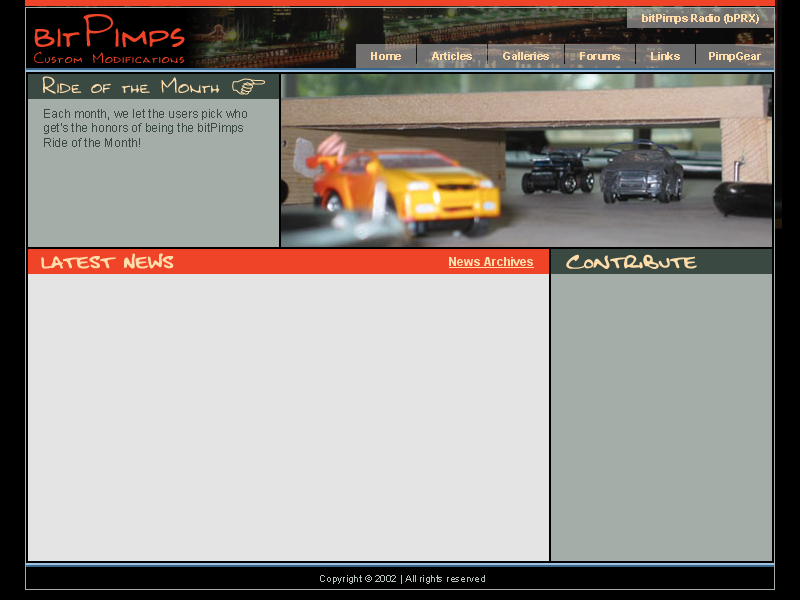
<style>
.page{position:relative;width:800px;height:600px;background:#e4e4e4}
.page>*{position:absolute;margin:0}
.t1{font:48px "Kilroy-WasHere";color:#ef4427}
.t2{font:11px "Arial-BoldMT";letter-spacing:-0.01em;color:#ffddab}
.t3{font:16px "Kilroy-WasHere";letter-spacing:0.055em;color:#ef4427}
.t4{font:11px "Arial-BoldMT";color:#ffddab}
.t5{font:24px "Kilroy-WasHere";color:#ffddab}
.t6{font:12px "ArialMT";color:#3a4942}
.t7{font:10px "ArialMT";color:#b6c4bd}
</style>
<div class="page">
<p class="t1" style="left:34px;top:14px;width:151px;height:34px">bitPimps</p>
<p class="t2" style="left:642px;top:14px;width:117px;height:10px">bitPimps Radio (bPRX)</p>
<p class="t3" style="left:34px;top:51px;width:151px;height:13px">Custom Modifications</p>
<p class="t4" style="left:371px;top:52px;width:30px;height:8px">Home</p>
<p class="t4" style="left:432px;top:52px;width:40px;height:8px">Articles</p>
<p class="t4" style="left:503px;top:52px;width:46px;height:8px">Galleries</p>
<p class="t4" style="left:580px;top:52px;width:40px;height:8px">Forums</p>
<p class="t4" style="left:651px;top:52px;width:29px;height:8px">Links</p>
<p class="t4" style="left:709px;top:52px;width:52px;height:10px">PimpGear</p>
<p class="t5" style="left:42px;top:76px;width:178px;height:18px">Ride of the Month</p>
<p class="t6" style="left:44px;top:109px;width:203px;height:38px">Each month, we let the users pick who<br>get's the honors of being the bitPimps<br>Ride of the Month!</p>
<p class="t7" style="left:320px;top:575px;width:165px;height:9px">Copyright © 2002 | All rights reserved</p>
</div>
